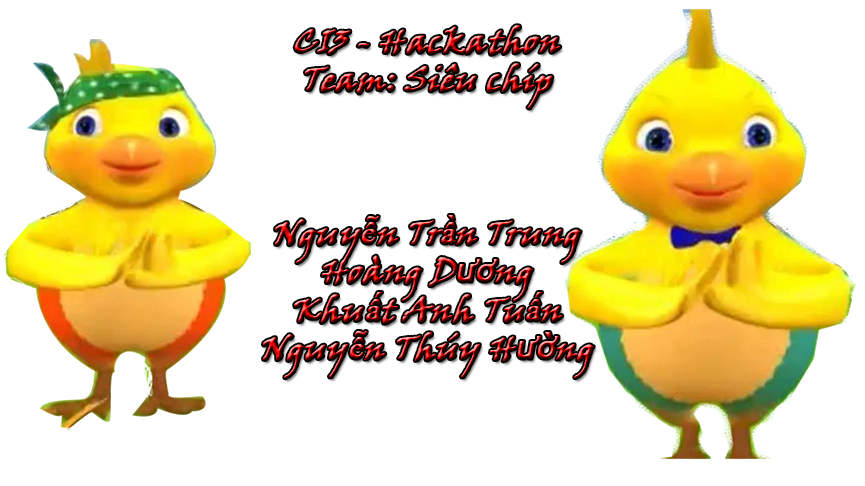
<style>
.page{position:relative;width:865px;height:486px;background:#ffffff}
.page>*{position:absolute;margin:0}
.t1{font:32px "VinerHandITC";font-weight:bold;font-style:italic}
.t2{font:32px "TimesNewRomanPSMT";font-weight:bold;font-style:italic}
.t3{font:32px "Tahoma";font-weight:bold;font-style:italic}
</style>
<div class="page">
<p class="t1" style="left:263px;top:25px;width:331px;height:354px;text-align:center">CI3 - Hackathon<br>Team: Siêu chíp<br><br><br><br>Nguy<span class="t2">ễ</span>n Tr<span class="t2">ầ</span>n Trung<br>Hoàng D<span class="t3">ươ</span>ng<br>Khu<span class="t2">ấ</span>t Anh Tu<span class="t2">ấ</span>n<br>Nguy<span class="t2">ễ</span>n Thúy H<span class="t3">ườ</span>ng</p>
</div>
